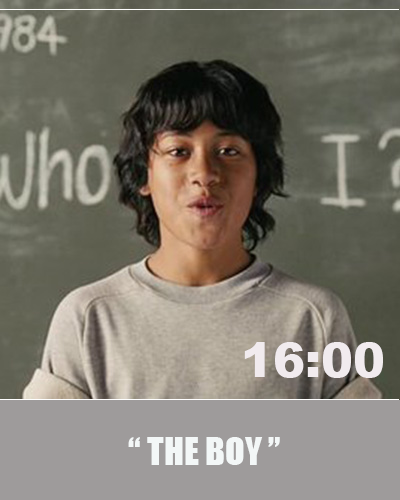
<style>
.page{position:relative;width:400px;height:500px}
.page>*{position:absolute;margin:0}
.t1{font:48px "Arial-Black";color:#f1ebee}
.t2{font:30px "MyriadPro-Regular";color:#f1ebee}
.t3{font:36px "Impact";color:#f3f7f7}
</style>
<div class="page">
<p class="t1" style="left:244px;top:342px;width:139px;height:36px"><span class="t2">  </span>16:00</p>
<p class="t3" style="left:128px;top:437px;width:152px;height:28px">“ THE BOY ”</p>
</div>
